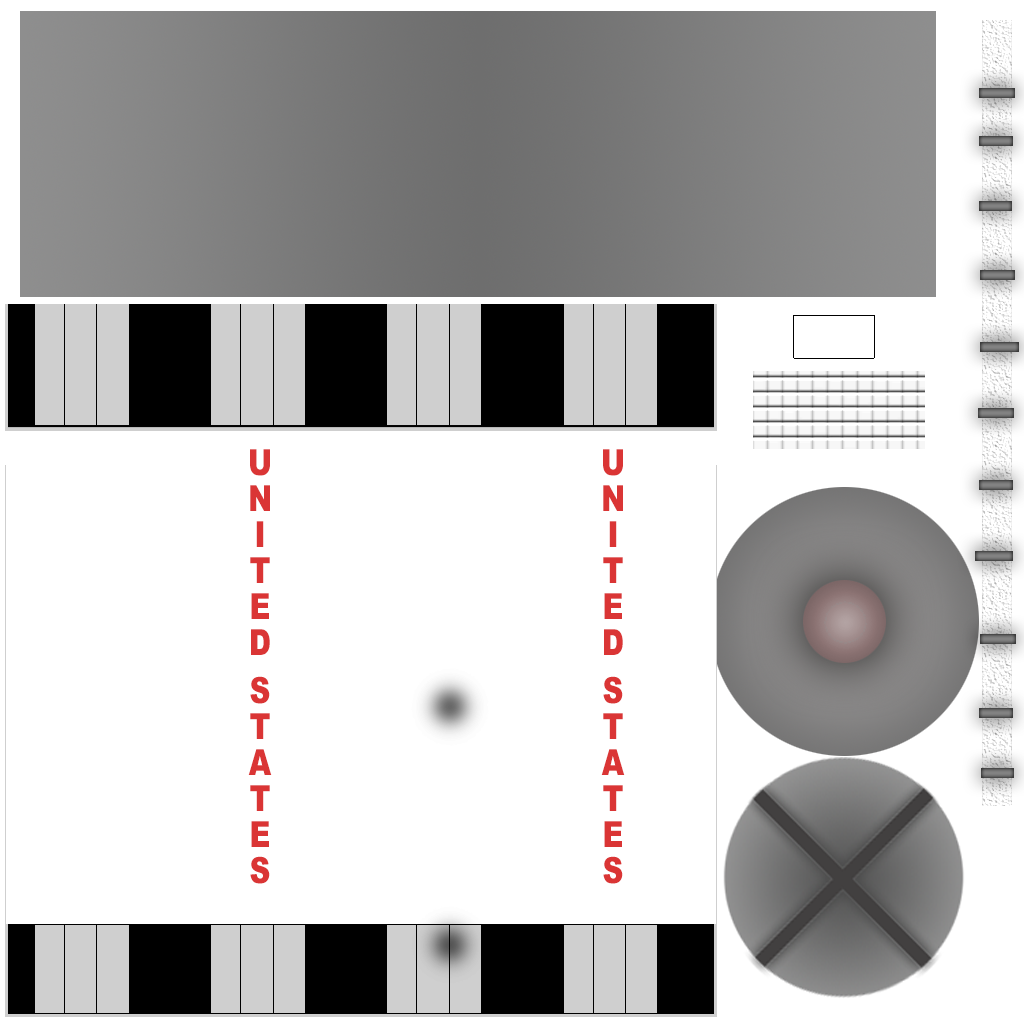
<style>
.page{position:relative;width:1024px;height:1024px;background:#ffffff}
.page>*{position:absolute;margin:0}
.t1{font:28.8px "Arial-Black";color:#da3535;scale:1.25 1}
</style>
<div class="page">
<p class="t1" style="left:248px;top:449px;width:24px;height:435px;text-align:center">UNITED STATES</p>
<p class="t1" style="left:601px;top:449px;width:24px;height:435px;text-align:center">UNITED STATES</p>
</div>
